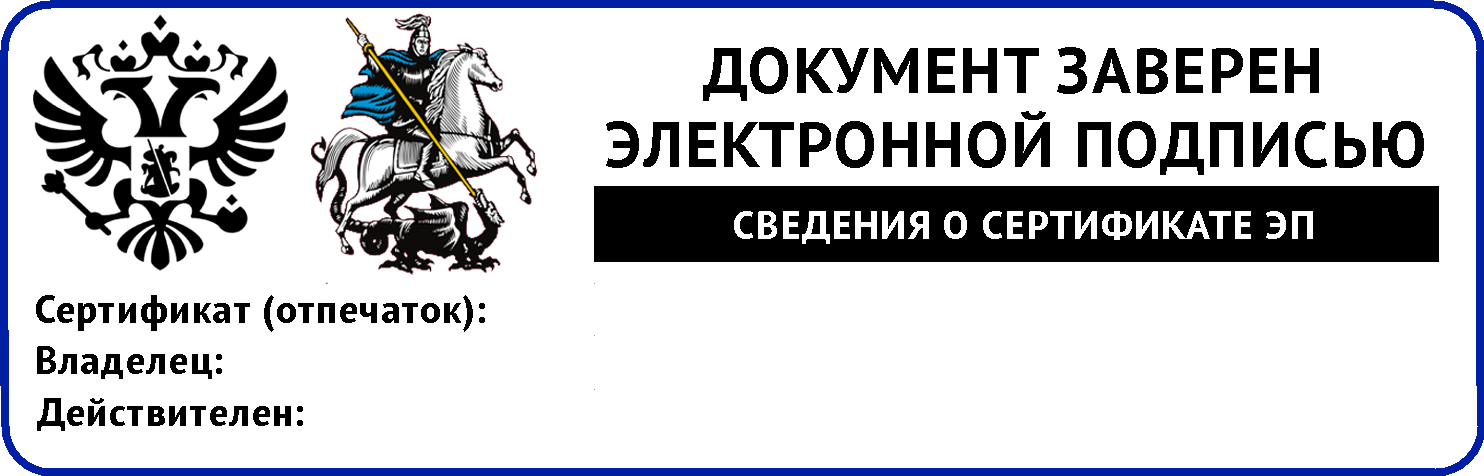
<style>
.page{position:relative;width:1484px;height:476px;background:#ffffff}
.page>*{position:absolute;margin:0}
.t1{font:64px "PTSans-Bold";letter-spacing:0.03em;color:#000000}
.t2{font:40px "PTSans-Bold";letter-spacing:0.03em;color:#ffffff}
.t3{font:40px "PTSans-Bold";letter-spacing:0.03em;color:#000000}
</style>
<div class="page">
<p class="t1" style="left:703px;top:47px;width:616px;height:54px">ДОКУМЕНТ ЗАВЕРЕН</p>
<p class="t1" style="left:606px;top:111px;width:818px;height:64px">ЭЛЕКТРОННОЙ ПОДПИСЬЮ</p>
<p class="t2" style="left:734px;top:211px;width:579px;height:33px">СВЕДЕНИЯ О СЕРТИФИКАТЕ ЭП</p>
<p class="t3" style="left:36px;top:295px;width:449px;height:37px">Сертификат (отпечаток):</p>
<p class="t3" style="left:37px;top:346px;width:185px;height:33px">Владелец:</p>
<p class="t3" style="left:37px;top:398px;width:266px;height:33px">Действителен:</p>
</div>
